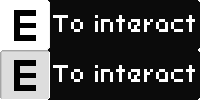
<style>
.page{position:relative;width:200px;height:100px;background:#0b0b0b}
.page>*{position:absolute;margin:0}
.t1{font:27px "Uni0553";color:#ffffff;scale:0.88 1}
</style>
<div class="page">
<p class="t1" style="left:53px;top:15px;width:142px;height:17px">To interact</p>
<p class="t1" style="left:53px;top:65px;width:142px;height:17px">To interact</p>
</div>
